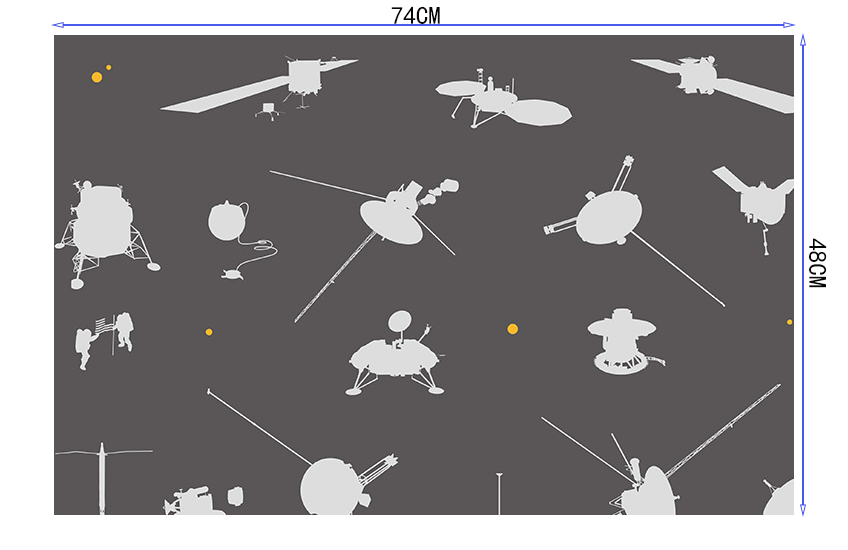
<style>
.page{position:relative;width:848px;height:550px;background:#5a5657}
.page>*{position:absolute;margin:0}
.t1{font:25px "KaiTi";color:#0a0505;text-transform:uppercase}
</style>
<div class="page">
<p class="t1" style="left:391px;top:6px;width:49px;height:18px">74cm</p>
<p class="t1" style="left:809px;top:238px;width:18px;height:50px;rotate:90deg">48cm</p>
</div>
